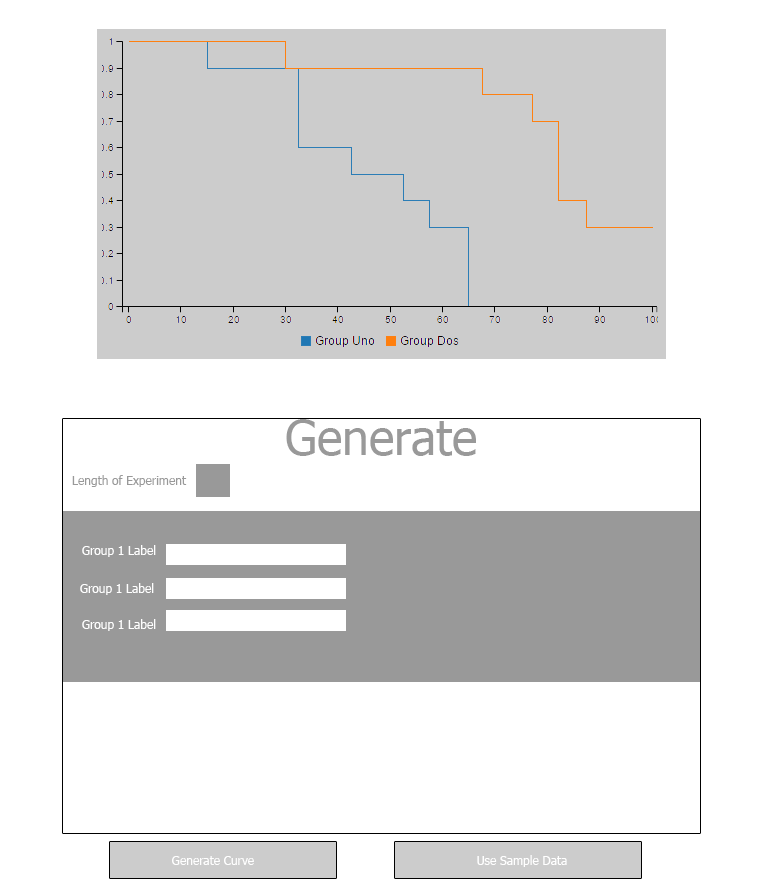
<style>
.page{position:relative;width:763px;height:881px;background:#ffffff}
.page>*{position:absolute;margin:0}
.t1{font:48px "Tahoma";color:#999999}
.t2{font:12px "Tahoma";color:#999999}
.t3{font:12px "Tahoma";color:#ffffff}
</style>
<div class="page">
<p class="t1" style="left:286px;top:419px;width:190px;height:37px">Generate</p>
<p class="t2" style="left:72px;top:475px;width:115px;height:12px">Length of Experiment</p>
<p class="t3" style="left:82px;top:545px;width:74px;height:12px">Group 1 Label</p>
<p class="t3" style="left:80px;top:583px;width:74px;height:12px">Group 1 Label</p>
<p class="t3" style="left:82px;top:619px;width:74px;height:12px">Group 1 Label</p>
<p class="t3" style="left:172px;top:856px;width:82px;height:9px">Generate Curve</p>
<p class="t3" style="left:477px;top:855px;width:90px;height:12px">Use Sample Data</p>
</div>
